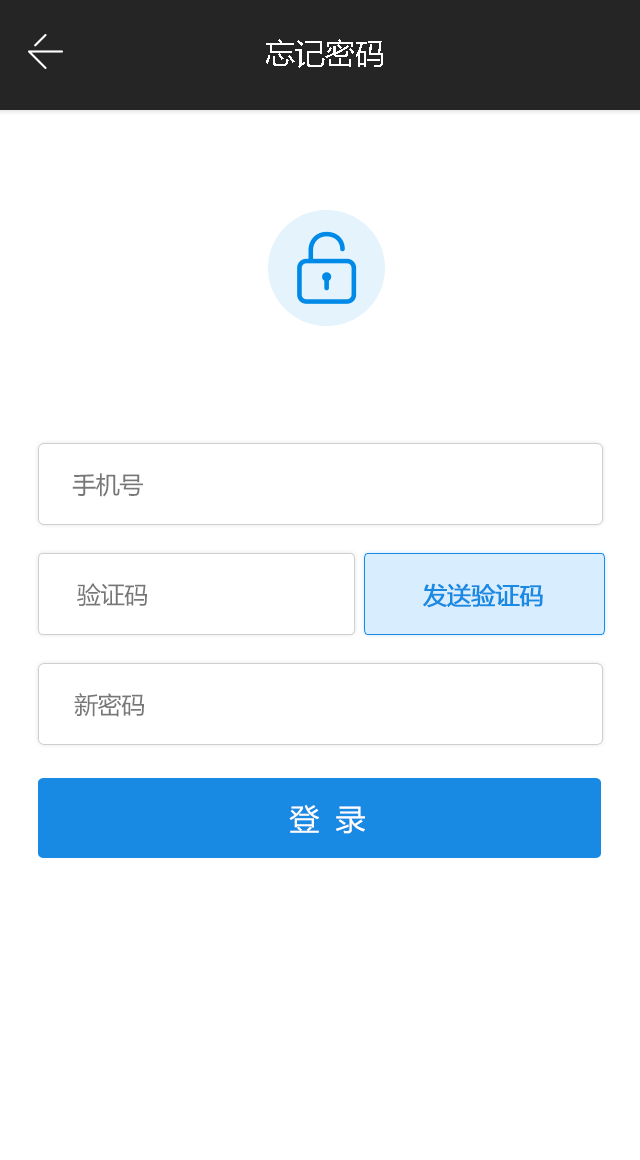
<style>
.page{position:relative;width:640px;height:1160px;background:#ffffff}
.page>*{position:absolute;margin:0}
.t1{font:30px "MicrosoftYaHei";color:#ffffff}
.t2{font:24px "MicrosoftYaHei";letter-spacing:-0.02em;color:#777777}
.t3{font:24px "MicrosoftYaHei";letter-spacing:-0.02em;color:#188ae4;font-weight:bold}
.t4{font:30px "MicrosoftYaHei";letter-spacing:-0.02em;color:#ffffff}
</style>
<div class="page">
<p class="t1" style="left:266px;top:39px;width:117px;height:29px">忘记密码</p>
<p class="t2" style="left:72px;top:473px;width:71px;height:24px">手机号</p>
<p class="t2" style="left:77px;top:583px;width:70px;height:23px">验证码</p>
<p class="t3" style="left:423px;top:583px;width:120px;height:25px">发送验证码</p>
<p class="t2" style="left:74px;top:693px;width:70px;height:24px">新密码</p>
<p class="t4" style="left:289px;top:805px;width:76px;height:29px">登  录</p>
</div>
